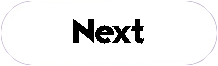
<style>
.page{position:relative;width:218px;height:66px;background:#ffffff}
.page>*{position:absolute;margin:0}
.t1{font:35.1px "TypoGraphica";color:#010000}
</style>
<div class="page">
<p class="t1" style="left:73px;top:19px;width:71px;height:25px">Next</p>
</div>
